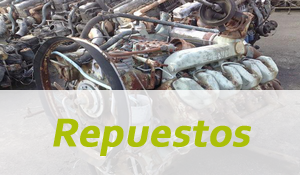
<style>
.page{position:relative;width:300px;height:175px}
.page>*{position:absolute;margin:0}
.t1{font:41.7px "Corbel-Bold";letter-spacing:0.005em;color:#abbf08;font-weight:bold;font-style:italic}
</style>
<div class="page">
<p class="t1" style="left:53px;top:118px;width:198px;height:38px">Repuestos</p>
</div>
